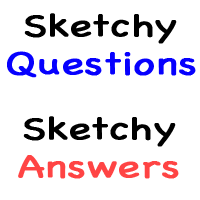
<style>
.page{position:relative;width:200px;height:200px;background:#ffffff}
.page>*{position:absolute;margin:0}
.t1{font:32px "Chalkboard";color:#0600fe;font-weight:bold;scale:1.3 1}
.t2{font:32px "Chalkboard";color:#000000;font-weight:bold;scale:1.3 1}
.t3{font:32px "Chalkboard";color:#ff4444;font-weight:bold;scale:1.3 1}
</style>
<div class="page">
<p class="t1" style="left:7px;top:13px;width:189px;height:65px;text-align:center"><span class="t2">Sketchy<br></span>Questions</p>
<p class="t2" style="left:18px;top:116px;width:161px;height:63px;text-align:center">Sketchy<br><span class="t3">Answers</span></p>
</div>
